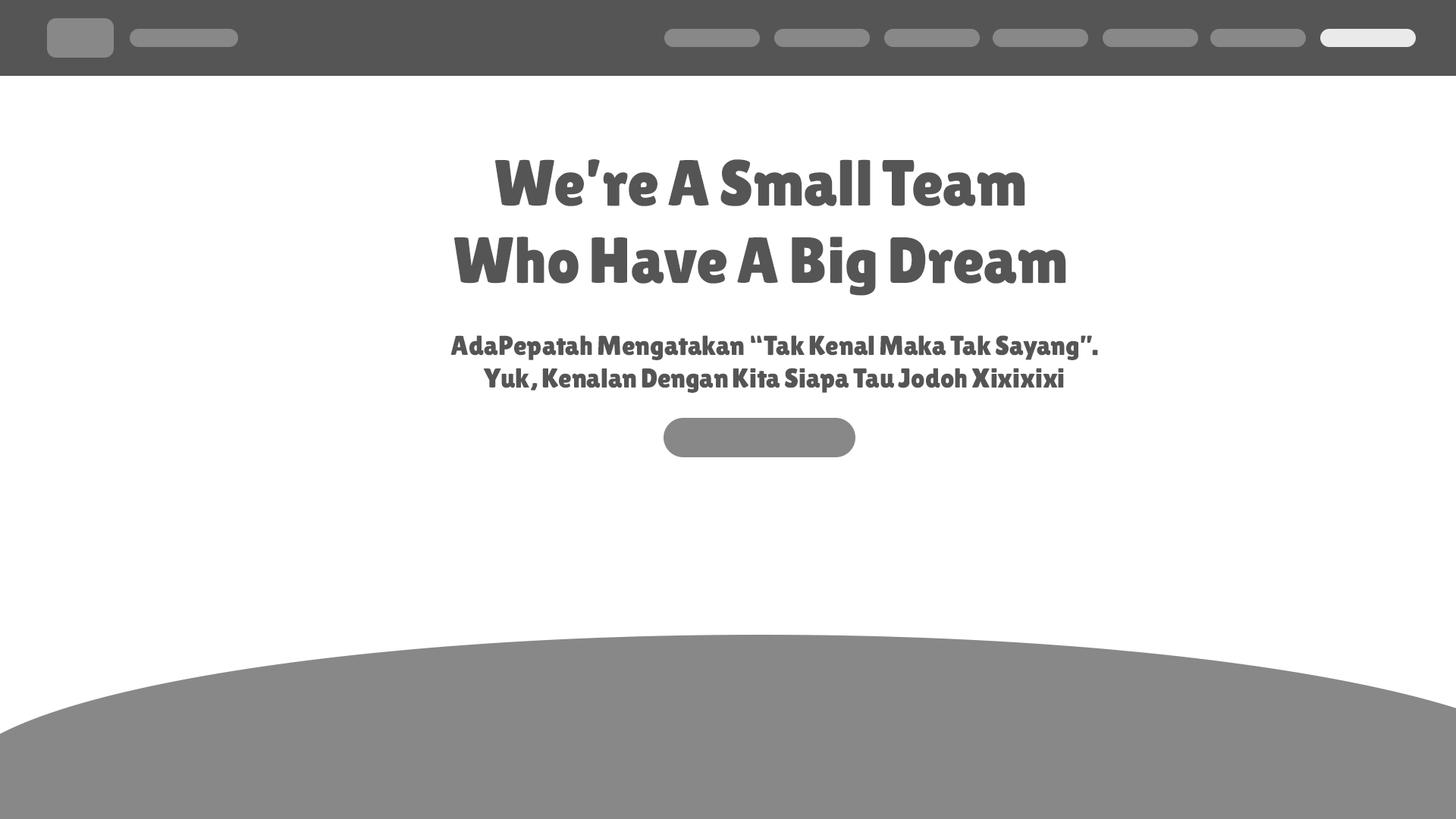
<style>
.page{position:relative;width:1456px;height:819px;background:#ffffff}
.page>*{position:absolute;margin:0}
.t1{font:64.9px "LilitaOne";letter-spacing:-0.025em;color:#555555}
.t2{font:27.3px "LilitaOne";letter-spacing:-0.025em;color:#555555}
</style>
<div class="page">
<p class="t1" style="left:453px;top:159px;width:613px;height:137px;text-align:center">We’re A Small Team<br>Who Have A Big Dream</p>
<p class="t2" style="left:450px;top:335px;width:648px;height:58px;text-align:center">AdaPepatah Mengatakan “Tak Kenal Maka Tak Sayang”.<br>Yuk, Kenalan Dengan Kita Siapa Tau Jodoh Xixixixi</p>
</div>
